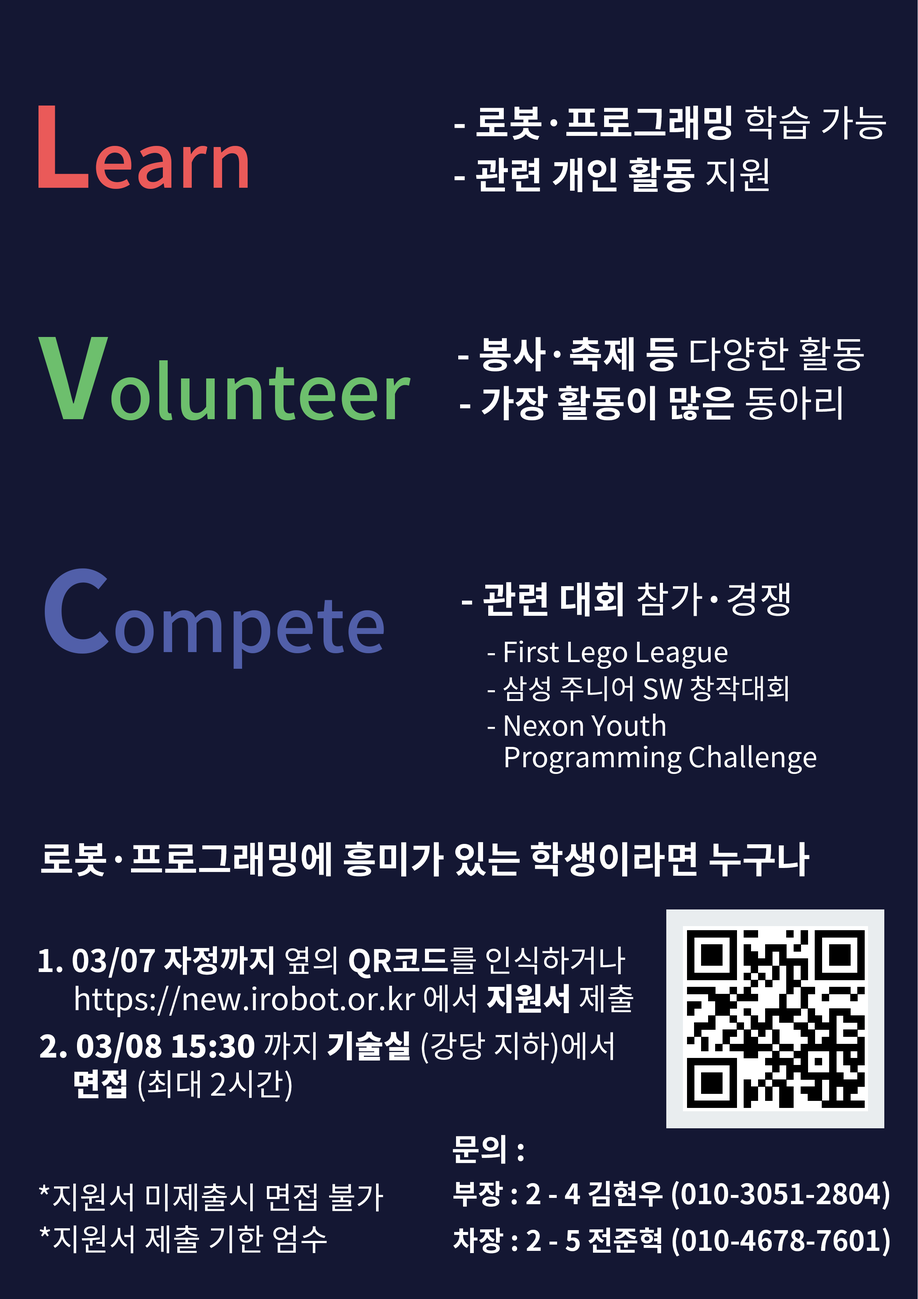
<style>
.page{position:relative;width:918px;height:1299px;background:#141733}
.page>*{position:absolute;margin:0}
.t1{font:74px "NotoSansCJKkr-Medium";color:#ea5a59}
.t2{font:111.1px "NotoSansCJKkr-Bold";color:#ea5a59}
.t3{font:37px "NotoSansCJKkr-Bold";color:#ffffff}
.t4{font:37px "NotoSansCJKkr-Regular";color:#ffffff}
.t5{font:74px "NotoSansCJKkr-Medium";color:#6dbf6d}
.t6{font:111.1px "NotoSansCJKkr-Bold";color:#6dbf6d}
.t7{font:74px "NotoSansCJKkr-Medium";color:#515fa9}
.t8{font:111.1px "NotoSansCJKkr-Bold";color:#515fa9}
.t9{font:27.8px "NotoSansCJKkr-Regular";color:#ffffff}
.t10{font:30.9px "NotoSansCJKkr-Bold";color:#ffffff}
.t11{font:30.9px "NotoSansCJKkr-Regular";color:#ffffff}
.t12{font:30.9px "NotoSansCJKkr-Black";color:#ffffff}
.t13{font:27.8px "NotoSansCJKkr-Bold";color:#ffffff}
</style>
<div class="page">
<p class="t1" style="left:39px;top:106px;width:209px;height:83px"><span class="t2">L</span>earn</p>
<p class="t3" style="left:455px;top:106px;width:431px;height:34px">- 로봇·프로그래밍 <span class="t4">학습 가능</span></p>
<p class="t3" style="left:455px;top:157px;width:314px;height:35px">- 관련 개인 활동<span class="t4"> 지원</span></p>
<p class="t5" style="left:38px;top:337px;width:373px;height:84px"><span class="t6">V</span>olunteer</p>
<p class="t3" style="left:458px;top:337px;width:406px;height:34px">- 봉사·축제 등 <span class="t4">다양한 활동</span></p>
<p class="t3" style="left:460px;top:385px;width:382px;height:35px">- 가장 활동이 많은<span class="t4"> 동아리</span></p>
<p class="t7" style="left:45px;top:568px;width:339px;height:101px"><span class="t8">C</span>ompete</p>
<p class="t3" style="left:462px;top:582px;width:327px;height:34px">- 관련 대회 <span class="t4">참가</span>·<span class="t4">경쟁</span></p>
<p class="t9" style="left:488px;top:640px;width:239px;height:29px">- First Lego League</p>
<p class="t9" style="left:488px;top:676px;width:300px;height:25px">- 삼성 주니어 SW 창작대회</p>
<p class="t9" style="left:488px;top:713px;width:177px;height:23px">- Nexon Youth</p>
<p class="t9" style="left:506px;top:745px;width:310px;height:29px">Programming Challenge</p>
<p class="t3" style="left:41px;top:842px;width:769px;height:35px">로봇·프로그래밍에 흥미가 있는 학생이라면 누구나</p>
<p class="t10" style="left:39px;top:946px;width:586px;height:32px">1. 03/07 자정까지 <span class="t11">옆의</span> QR코드<span class="t11">를 인식하거나</span></p>
<p class="t11" style="left:76px;top:984px;width:557px;height:33px">https://new.irobot.or.kr 에서 <span class="t12">지원서</span> 제출</p>
<p class="t12" style="left:40px;top:1031px;width:573px;height:33px">2. 03/08 15:30 <span class="t11">까지</span> 기술실 <span class="t11">(강당 지하)에서</span></p>
<p class="t11" style="left:74px;top:1069px;width:218px;height:33px"><span class="t12">면접 </span>(최대 2시간)</p>
<p class="t10" style="left:453px;top:1135px;width:71px;height:29px">문의 :</p>
<p class="t13" style="left:454px;top:1181px;width:435px;height:29px">부장 : 2 - 4 김현우 (010-3051-2804)</p>
<p class="t11" style="left:39px;top:1183px;width:344px;height:28px">*지원서 미제출시 면접 불가</p>
<p class="t11" style="left:40px;top:1225px;width:287px;height:28px">*지원서 제출 기한 엄수</p>
<p class="t13" style="left:453px;top:1227px;width:437px;height:29px">차장 : 2 - 5 전준혁 (010-4678-7601)</p>
</div>
